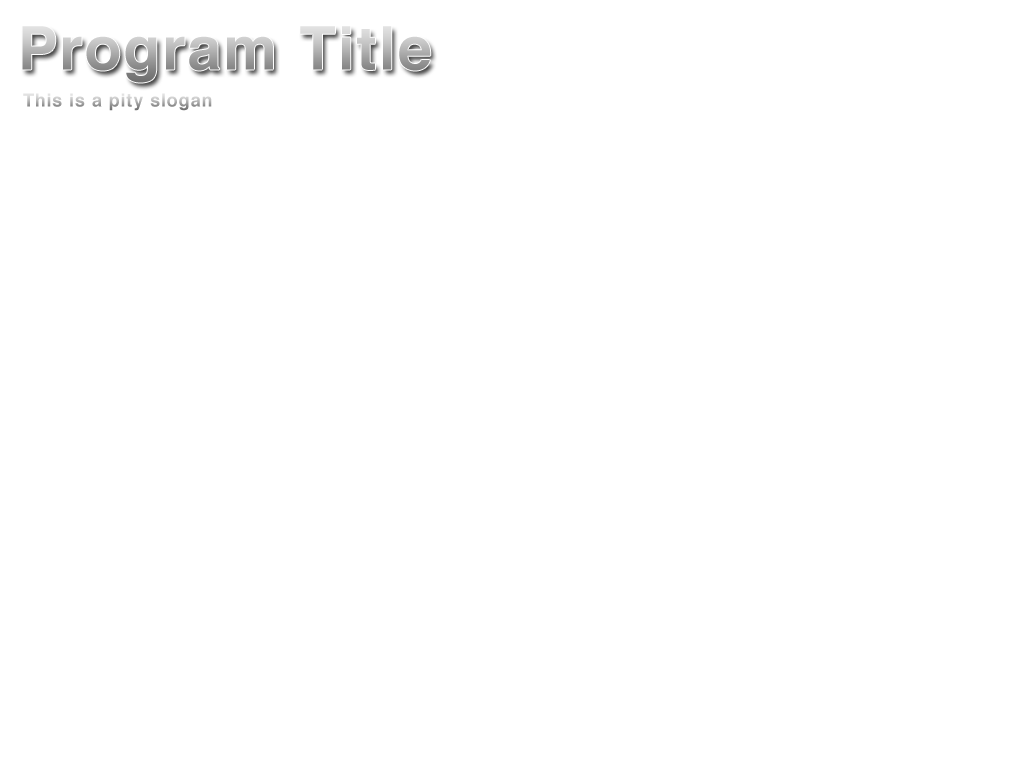
<style>
.page{position:relative;width:1024px;height:768px;background:#ffffff}
.page>*{position:absolute;margin:0}
.t1{font:60px "Helvetica-Bold";letter-spacing:0.05em}
.t2{font:18px "Helvetica-Bold";letter-spacing:0.05em}
</style>
<div class="page">
<p class="t1" style="left:22px;top:26px;width:409px;height:57px">Program Title</p>
<p class="t2" style="left:23px;top:93px;width:189px;height:18px">This is a pity slogan</p>
</div>
